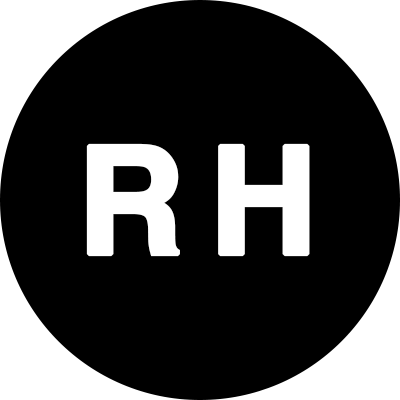
<style>
.page{position:relative;width:400px;height:400px;background:#000000}
.page>*{position:absolute;margin:0}
.t1{font:150px "Helvetica-Bold";letter-spacing:0.14em;color:#ffffff;font-weight:bold}
</style>
<div class="page">
<p class="t1" style="left:86px;top:143px;width:224px;height:114px">RH</p>
</div>
